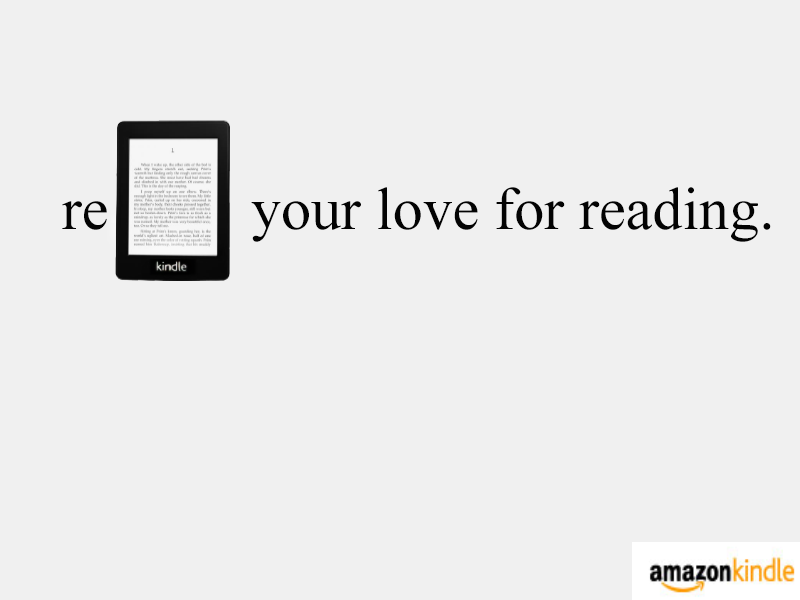
<style>
.page{position:relative;width:800px;height:600px;background:#f0f0f0}
.page>*{position:absolute;margin:0}
.t1{font:60px "TimesNewRomanPSMT";color:#030303}
</style>
<div class="page">
<p class="t1" style="left:251px;top:187px;width:520px;height:55px">your love for reading.</p>
<p class="t1" style="left:62px;top:201px;width:45px;height:29px">re</p>
</div>
